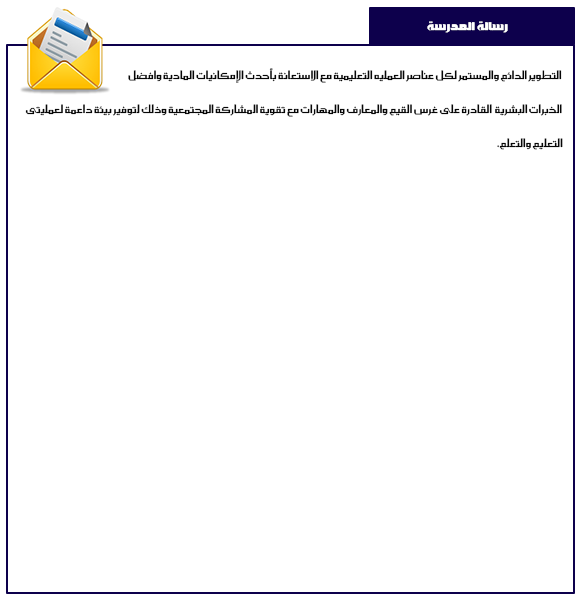
<style>
.page{position:relative;width:580px;height:598px;background:#ffffff}
.page>*{position:absolute;margin:0}
.t1{font:15px "SC_OUHOD";color:#ffffff}
.t2{font:14px "SC_KHALID";color:#060606}
</style>
<div class="page">
<p class="t1" style="left:427px;top:21px;width:81px;height:12px">رسالة  المدرسة</p>
<p class="t2" style="left:128px;top:68px;width:434px;height:15px">التطوير الدائم والمستمر لكل عناصر العمليه التعليمية مع الاستعانة بأحدث الإمكانيات المادية وافضل</p>
<p class="t2" style="left:25px;top:104px;width:537px;height:13px">الخبرات البشرية  القادرة على غرس القيم والمعارف والمهارات مع تقوية المشاركة المجتمعية وذلك لتوفير بيئة داعمة لعمليتى</p>
<p class="t2" style="left:497px;top:138px;width:66px;height:12px">.التعليم والتعلم</p>
</div>
